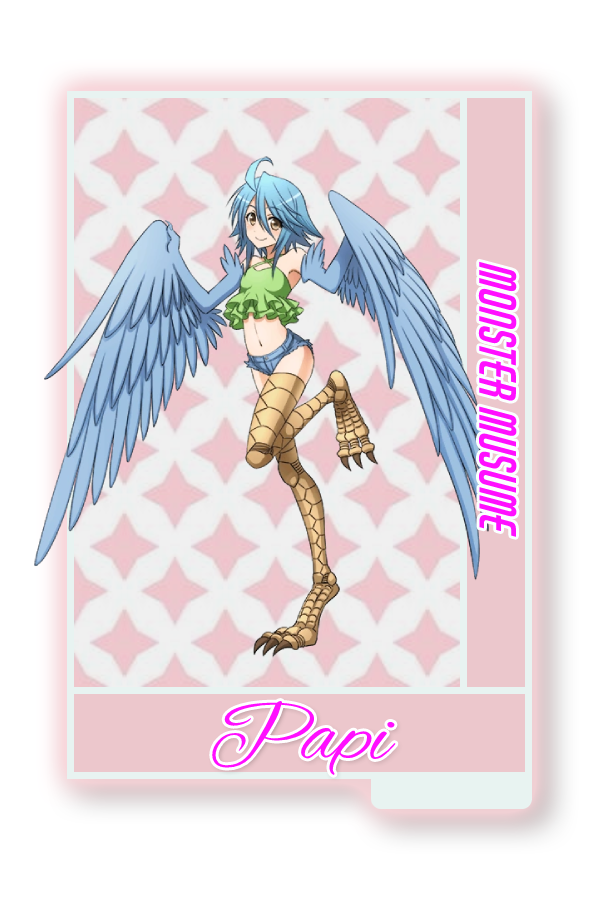
<style>
.page{position:relative;width:600px;height:900px;background:#ffffff}
.page>*{position:absolute;margin:0}
.t1{font:48.8px "AirAmerica-Regular";color:#ff0fff}
.t2{font:88.3px "AlexBrush-Regular";color:#ff0fff}
</style>
<div class="page">
<p class="t1" style="left:478px;top:261px;width:39px;height:276px;rotate:90deg">Monster Musume</p>
<p class="t2" style="left:212px;top:701px;width:184px;height:74px">Papi</p>
</div>
